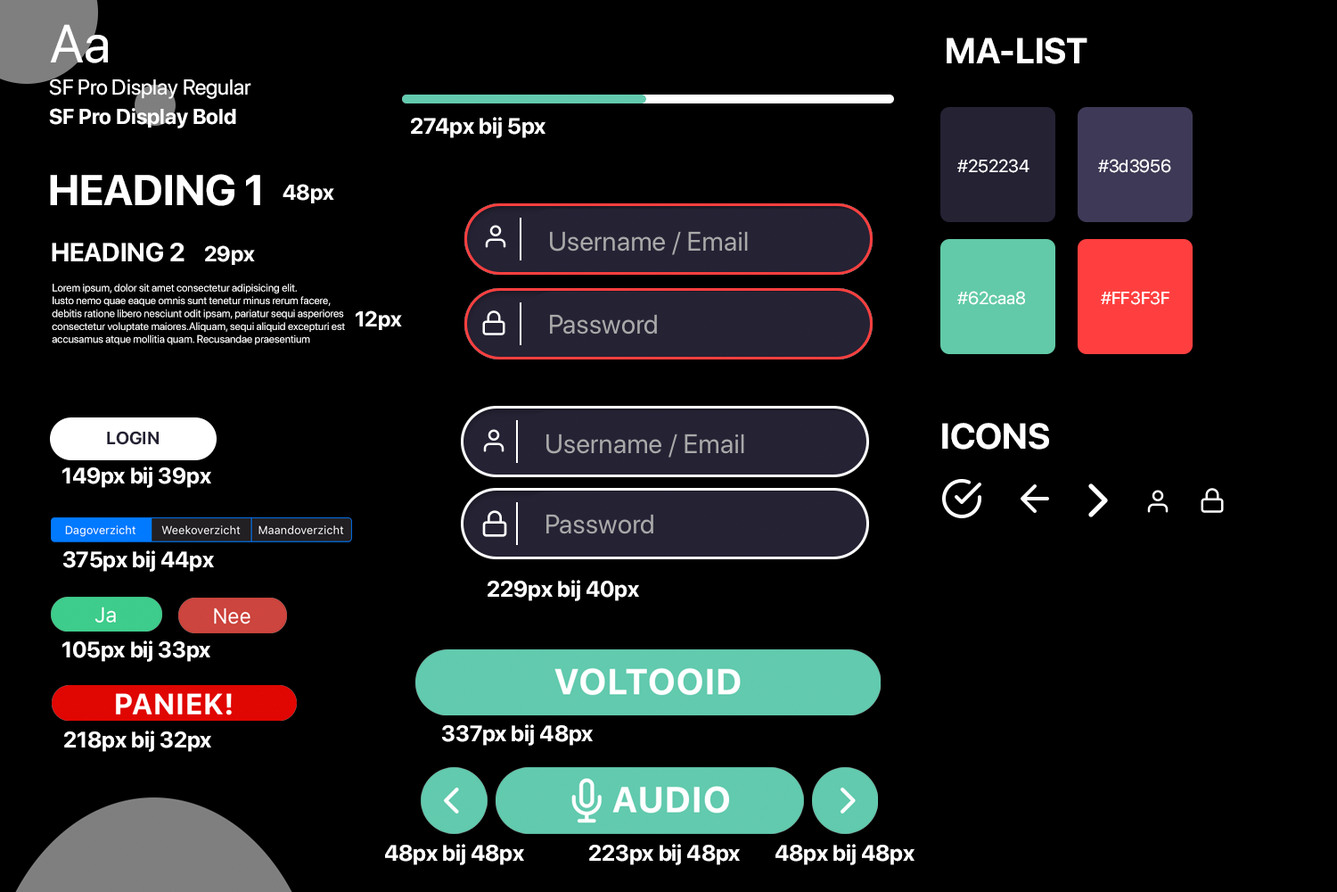
<style>
.page{position:relative;width:1337px;height:892px;background:#000000}
.page>*{position:absolute;margin:0}
.t1{font:53.5px "SFProDisplay-Regular";color:#ffffff}
.t2{font:35.7px "SFProDisplay-Bold";color:#ffffff}
.t3{font:21.4px "SFProDisplay-Regular";color:#ffffff}
.t4{font:21.4px "SFProDisplay-Bold";color:#ffffff}
.t5{font:22.3px "SFProDisplay-Bold";color:#ffffff}
.t6{font:17.8px "SFProDisplay-Regular";color:#ffffff}
.t7{font:42.8px "SFProDisplay-Bold";color:#ffffff}
.t8{font:25.9px "SFProDisplay-Bold";color:#ffffff}
.t9{font:10.7px "SFProDisplay-Regular";color:#ffffff}
.t10{font:17.8px "SFProDisplay-Bold";color:#232032}
</style>
<div class="page">
<p class="t1" style="left:50px;top:24px;width:58px;height:39px">Aa</p>
<p class="t2" style="left:947px;top:37px;width:141px;height:27px">MA-LIST</p>
<p class="t3" style="left:49px;top:78px;width:202px;height:21px">SF Pro Display Regular</p>
<p class="t4" style="left:49px;top:108px;width:187px;height:20px">SF Pro Display Bold</p>
<p class="t5" style="left:411px;top:117px;width:135px;height:21px">274px bij 5px</p>
<p class="t6" style="left:958px;top:159px;width:72px;height:14px">#252234</p>
<p class="t6" style="left:1098px;top:159px;width:74px;height:14px">#3d3956</p>
<p class="t7" style="left:50px;top:174px;width:210px;height:32px">HEADING 1</p>
<p class="t4" style="left:283px;top:184px;width:51px;height:19px">48px</p>
<p class="t8" style="left:52px;top:243px;width:133px;height:19px">HEADING 2</p>
<p class="t4" style="left:205px;top:245px;width:50px;height:20px">29px</p>
<p class="t9" style="left:52px;top:284px;width:293px;height:61px">Lorem ipsum, dolor sit amet consectetur adipisicing elit. <br>Iusto nemo quae eaque omnis sunt tenetur minus rerum facere, <br>debitis ratione libero nesciunt odit ipsam, pariatur sequi asperiores <br>consectetur voluptate maiores.Aliquam, sequi aliquid excepturi est<br>accusamus atque mollitia quam. Recusandae praesentium</p>
<p class="t6" style="left:958px;top:291px;width:67px;height:14px">#62caa8</p>
<p class="t6" style="left:1101px;top:291px;width:69px;height:14px">#FF3F3F</p>
<p class="t4" style="left:356px;top:310px;width:46px;height:20px">12px</p>
<p class="t2" style="left:942px;top:423px;width:107px;height:26px">ICONS</p>
<p class="t10" style="left:107px;top:431px;width:52px;height:14px">LOGIN</p>
<p class="t5" style="left:62px;top:466px;width:149px;height:22px">149px bij 39px</p>
<p class="t5" style="left:63px;top:550px;width:151px;height:22px">375px bij 44px</p>
<p class="t5" style="left:488px;top:580px;width:151px;height:21px">229px bij 40px</p>
<p class="t5" style="left:62px;top:640px;width:148px;height:22px">105px bij 33px</p>
<p class="t5" style="left:442px;top:724px;width:151px;height:21px">337px bij 48px</p>
<p class="t5" style="left:64px;top:730px;width:147px;height:22px">218px bij 32px</p>
<p class="t5" style="left:385px;top:843px;width:139px;height:22px">48px bij 48px</p>
<p class="t5" style="left:589px;top:843px;width:151px;height:22px">223px bij 48px</p>
<p class="t5" style="left:776px;top:843px;width:139px;height:22px">48px bij 48px</p>
</div>
